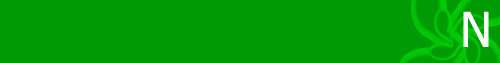
<style>
.page{position:relative;width:500px;height:63px;background:#009a04}
.page>*{position:absolute;margin:0}
.t1{font:48px "Tahoma";color:#ffffff}
</style>
<div class="page">
<p class="t1" style="left:463px;top:11px;width:26px;height:36px">N</p>
</div>
